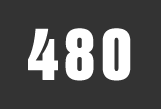
<style>
.page{position:relative;width:161px;height:109px;background:#333333}
.page>*{position:absolute;margin:0}
.t1{font:63.7px "Swiss921BT-RegularA";letter-spacing:0.05em;color:#ffffff;font-weight:bold}
</style>
<div class="page">
<p class="t1" style="left:28px;top:28px;width:103px;height:53px">480</p>
</div>
